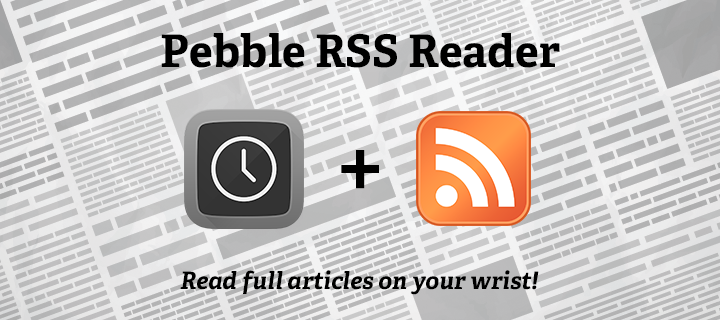
<style>
.page{position:relative;width:720px;height:320px}
.page>*{position:absolute;margin:0}
.t1{font:45px "Adelle-Bold";color:#000000}
.t2{font:100px "Adelle-Regular";color:#000000}
.t3{font:24px "Adelle-BoldItalic";color:#000000}
</style>
<div class="page">
<p class="t1" style="left:161px;top:33px;width:399px;height:35px">Pebble RSS Reader</p>
<p class="t2" style="left:341px;top:150px;width:38px;height:39px">+</p>
<p class="t3" style="left:180px;top:270px;width:359px;height:25px">Read full articles on your wrist!</p>
</div>
